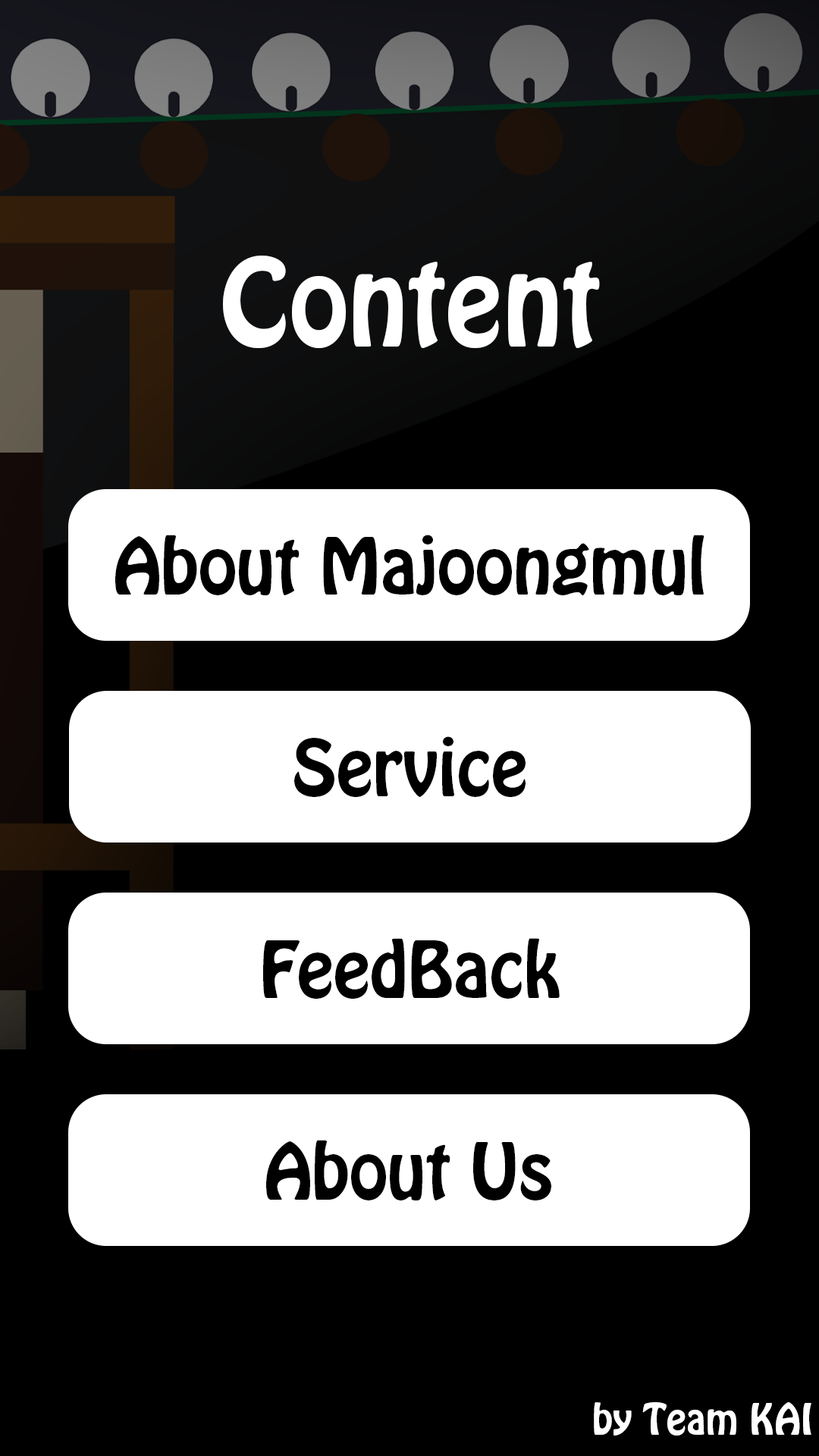
<style>
.page{position:relative;width:819px;height:1456px;background:#000000}
.page>*{position:absolute;margin:0}
.t1{font:107.4px "HoboStd";color:#ffffff}
.t2{font:69.5px "HoboStd";color:#000000}
.t3{font:37.9px "HoboStd";color:#ffffff}
</style>
<div class="page">
<p class="t1" style="left:223px;top:256px;width:377px;height:93px">Content</p>
<p class="t2" style="left:115px;top:535px;width:589px;height:60px">About Majoongmul</p>
<p class="t2" style="left:294px;top:736px;width:232px;height:61px">Service</p>
<p class="t2" style="left:263px;top:938px;width:297px;height:61px">FeedBack</p>
<p class="t2" style="left:266px;top:1140px;width:285px;height:60px">About Us</p>
<p class="t3" style="left:594px;top:1402px;width:217px;height:34px">by Team KAI</p>
</div>
